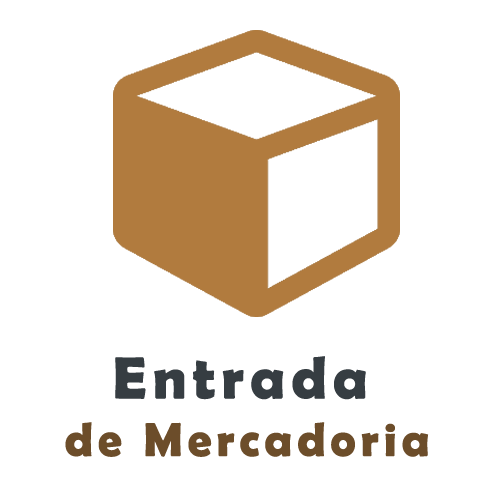
<style>
.page{position:relative;width:500px;height:500px;background:#ffffff}
.page>*{position:absolute;margin:0}
.t1{font:48px "BerlinSansFBDemi-Bold";letter-spacing:0.1em;color:#6c4d2a}
.t2{font:60px "BerlinSansFBDemi-Bold";letter-spacing:0.1em;color:#363d42}
</style>
<div class="page">
<p class="t1" style="left:65px;top:356px;width:364px;height:101px;text-align:center"><span class="t2">Entrada <br></span>de Mercadoria</p>
</div>
